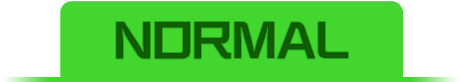
<style>
.page{position:relative;width:460px;height:82px;background:#42d62e}
.page>*{position:absolute;margin:0}
.t1{font:41.3px "KafuTechnoStd-HV";color:#125c00;scale:1.04 1}
</style>
<div class="page">
<p class="t1" style="left:116px;top:22px;width:232px;height:37px">NORMAL</p>
</div>
